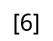
<style>
.page{position:relative;width:53px;height:41px;background:#ffffff}
.page>*{position:absolute;margin:0}
.t1{font:23.7px "DroidSans";color:#000000}
</style>
<div class="page">
<p class="t1" style="left:14px;top:13px;width:25px;height:22px">[6]</p>
</div>
